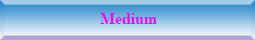
<style>
.page{position:relative;width:255px;height:40px}
.page>*{position:absolute;margin:0}
.t1{font:15.8px "TimesNewRomanPS-BoldMT";color:#d815ed}
</style>
<div class="page">
<p class="t1" style="left:100px;top:13px;width:57px;height:11px">Medium</p>
</div>
